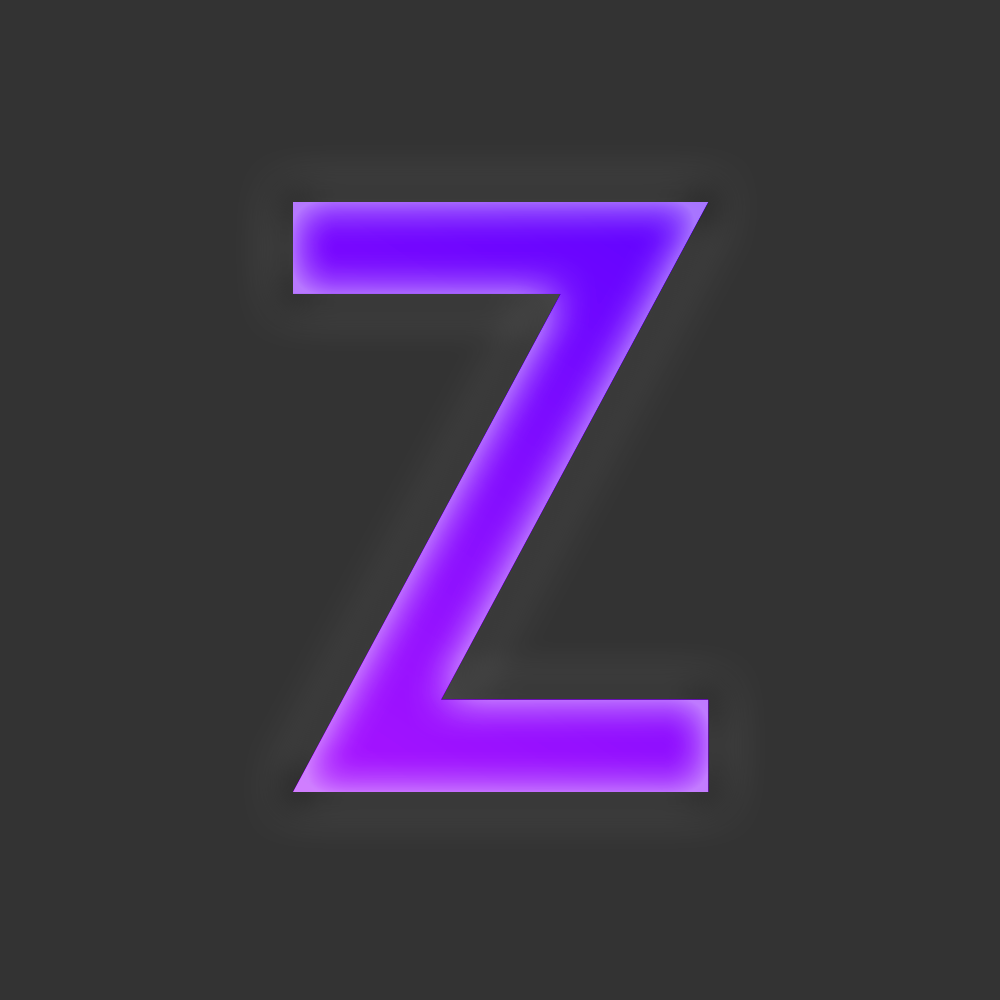
<style>
.page{position:relative;width:1000px;height:1000px;background:#333333}
.page>*{position:absolute;margin:0}
.t1{font:750px "LEMONMILK-Regular"}
</style>
<div class="page">
<p class="t1" style="left:293px;top:202px;width:416px;height:590px">Z</p>
</div>
